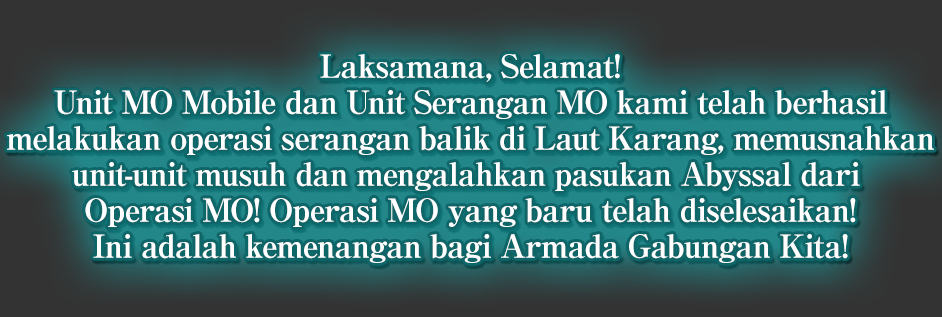
<style>
.page{position:relative;width:942px;height:317px}
.page>*{position:absolute;margin:0}
.t1{font:32px/36px "RyuminPro-ExBold";letter-spacing:-0.04em;color:#ffffff}
</style>
<div class="page">
<p class="t1" style="left:6px;top:54px;width:928px;height:209px;text-align:center">Laksamana, Selamat!<br>Unit MO Mobile dan Unit Serangan MO kami telah berhasil<br>melakukan operasi serangan balik di Laut Karang, memusnahkan<br>unit-unit musuh dan mengalahkan pasukan Abyssal dari <br>Operasi MO! Operasi MO yang baru telah diselesaikan!<br>Ini adalah kemenangan bagi Armada Gabungan Kita!</p>
</div>
